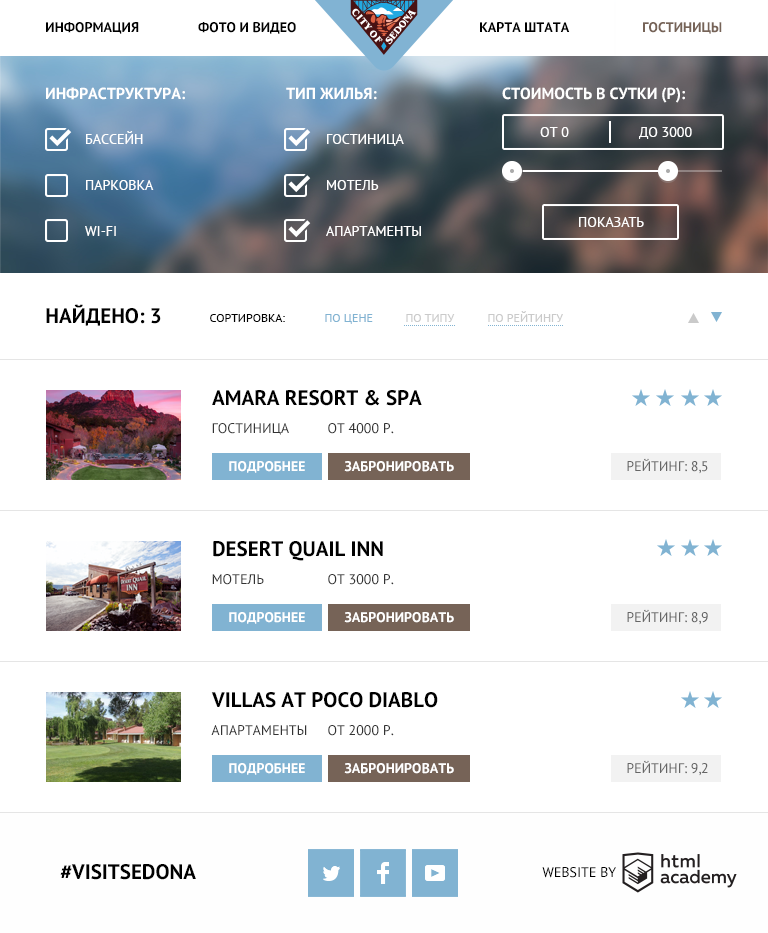
<style>
.page{position:relative;width:768px;height:933px;background:#ffffff}
.page>*{position:absolute;margin:0}
.t1{font:14px "PTSans-Bold";color:#000000;text-transform:uppercase}
.t2{font:14px "PTSans-Bold";color:#766357;text-transform:uppercase}
.t3{font:16px "PTSans-Bold";color:#ffffff;text-transform:uppercase}
.t4{font:14px "PTSans-Regular";color:#ffffff;text-transform:uppercase}
.t5{font:21px "PTSans-Bold";color:#000000;text-transform:uppercase}
.t6{font:12px "PTSans-Regular";color:#000000;text-transform:uppercase}
.t7{font:12px "PTSans-Regular";color:#81b3d2;text-transform:uppercase}
.t8{font:12px "PTSans-Regular";color:#cacaca;text-transform:uppercase}
.t9{font:14px "PTSans-Regular";color:#333333;text-transform:uppercase}
.t10{font:14px "PTSans-Bold";color:#ffffff;text-transform:uppercase}
.t11{font:14px "PTSans-Regular";color:#666666;text-transform:uppercase}
.t12{font:14px "PTSans-Regular";color:#000000;text-transform:uppercase}
</style>
<div class="page">
<p class="t1" style="left:46px;top:22px;width:93px;height:12px">ИНФОРМАЦИЯ</p>
<p class="t1" style="left:198px;top:22px;width:98px;height:12px">ФОТО И ВИДЕО</p>
<p class="t1" style="left:480px;top:22px;width:90px;height:10px">КАРТА ШТАТА</p>
<p class="t2" style="left:643px;top:22px;width:79px;height:12px">ГОСТИНИЦЫ</p>
<p class="t3" style="left:46px;top:87px;width:139px;height:13px">Инфраструктура:</p>
<p class="t3" style="left:286px;top:87px;width:91px;height:13px">Тип жилья:</p>
<p class="t3" style="left:502px;top:87px;width:183px;height:16px">Стоимость в сутки (Р):</p>
<p class="t4" style="left:86px;top:131px;width:57px;height:13px">Бассейн</p>
<p class="t4" style="left:327px;top:134px;width:77px;height:12px">Гостиница</p>
<p class="t4" style="left:540px;top:127px;width:29px;height:10px">от 0</p>
<p class="t4" style="left:639px;top:127px;width:53px;height:12px">ДО 3000</p>
<p class="t4" style="left:86px;top:180px;width:68px;height:10px">Парковка</p>
<p class="t4" style="left:327px;top:180px;width:52px;height:10px">Мотель</p>
<p class="t4" style="left:579px;top:217px;width:65px;height:10px">Показать</p>
<p class="t4" style="left:85px;top:226px;width:31px;height:10px">Wi-Fi</p>
<p class="t4" style="left:326px;top:226px;width:95px;height:10px">Апартаменты</p>
<p class="t5" style="left:46px;top:304px;width:115px;height:22px">Найдено: 3</p>
<p class="t6" style="left:210px;top:314px;width:75px;height:8px">Сортировка:</p>
<p class="t7" style="left:325px;top:314px;width:48px;height:10px">По цене</p>
<p class="t8" style="left:406px;top:314px;width:49px;height:8px">По типу</p>
<p class="t8" style="left:488px;top:311px;width:75px;height:11px">По рейтингу</p>
<p class="t5" style="left:212px;top:390px;width:210px;height:16px">Amara Resort &amp; Spa</p>
<p class="t9" style="left:212px;top:423px;width:77px;height:12px">Гостиница</p>
<p class="t9" style="left:328px;top:423px;width:66px;height:11px">ОТ 4000 Р.</p>
<p class="t10" style="left:229px;top:461px;width:76px;height:12px">Подробнее</p>
<p class="t10" style="left:344px;top:461px;width:110px;height:11px">Забронировать</p>
<p class="t11" style="left:627px;top:458px;width:81px;height:16px">Рейтинг: 8,5</p>
<p class="t5" style="left:213px;top:541px;width:170px;height:20px">Desert Quail Inn</p>
<p class="t9" style="left:212px;top:574px;width:52px;height:11px">Мотель</p>
<p class="t9" style="left:328px;top:574px;width:66px;height:11px">ОТ 3000 Р.</p>
<p class="t10" style="left:229px;top:612px;width:76px;height:12px">Подробнее</p>
<p class="t10" style="left:344px;top:612px;width:110px;height:11px">Забронировать</p>
<p class="t11" style="left:627px;top:609px;width:81px;height:16px">Рейтинг: 8,9</p>
<p class="t5" style="left:211px;top:692px;width:227px;height:16px">Villas at Poco Diablo</p>
<p class="t9" style="left:211px;top:725px;width:96px;height:10px">Апартаменты</p>
<p class="t9" style="left:328px;top:725px;width:66px;height:11px">ОТ 2000 Р.</p>
<p class="t11" style="left:627px;top:760px;width:81px;height:16px">Рейтинг: 9,2</p>
<p class="t10" style="left:229px;top:763px;width:76px;height:12px">Подробнее</p>
<p class="t10" style="left:344px;top:763px;width:110px;height:11px">Забронировать</p>
<p class="t5" style="left:60px;top:864px;width:136px;height:16px">#visitSEDONA</p>
<p class="t12" style="left:542px;top:867px;width:74px;height:11px">Website by</p>
</div>
